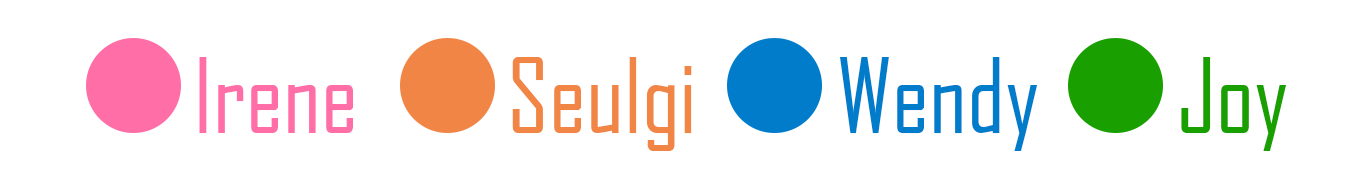
<style>
.page{position:relative;width:1366px;height:176px;background:#ffffff}
.page>*{position:absolute;margin:0}
.t1{font:100px "AgencyFB-Reg";color:#ff6ea7}
.t2{font:100px "AgencyFB-Reg";color:#f18545}
.t3{font:100px "AgencyFB-Reg";color:#007ccb}
.t4{font:100px "AgencyFB-Reg";color:#1a9f00}
</style>
<div class="page">
<p class="t1" style="left:199px;top:57px;width:154px;height:76px">Irene</p>
<p class="t2" style="left:512px;top:57px;width:180px;height:94px">Seulgi</p>
<p class="t3" style="left:840px;top:57px;width:198px;height:94px">Wendy</p>
<p class="t4" style="left:1181px;top:57px;width:106px;height:94px">Joy</p>
</div>
